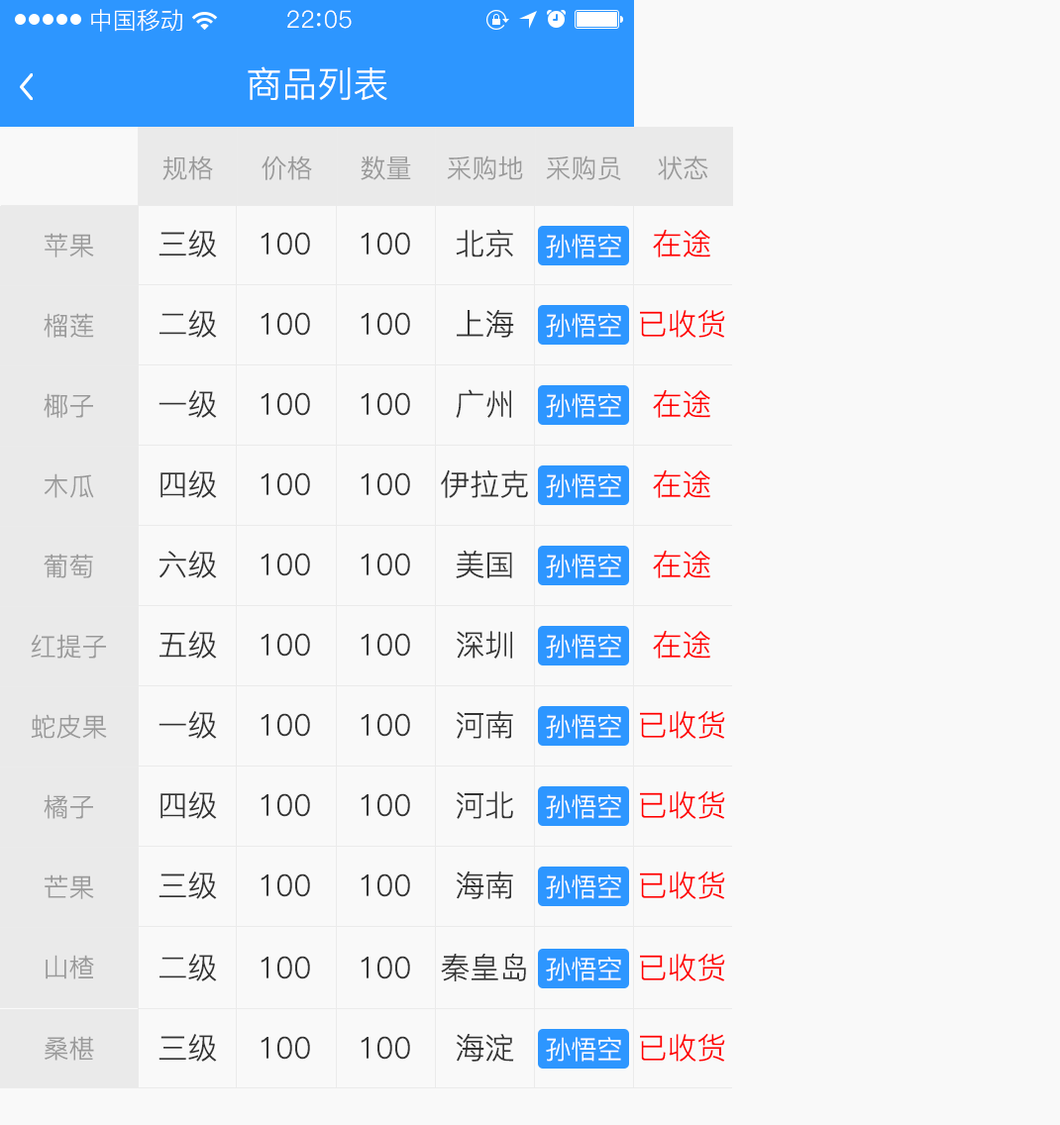
<style>
.page{position:relative;width:1060px;height:1125px;background:#f9f9f9}
.page>*{position:absolute;margin:0}
.t1{font:23.8px "PingFang-SC-Regular";color:#ffffff}
.t2{font:23.8px "PingFang-SC-Regular";letter-spacing:0.03em;color:#ffffff}
.t3{font:35.7px "PingFang-SC-Regular";color:#ffffff}
.t4{font:25.8px "PingFang-SC-Regular";color:#999999}
.t5{font:29.7px "PingFang-SC-Regular";color:#333333}
.t6{font:25.8px "PingFang-SC-Regular";color:#fefefe}
.t7{font:29.7px "PingFang-SC-Regular";color:#ff0000}
</style>
<div class="page">
<p class="t1" style="left:91px;top:9px;width:91px;height:23px">中国移动</p>
<p class="t2" style="left:287px;top:10px;width:65px;height:19px">22 05</p>
<p class="t3" style="left:248px;top:66px;width:139px;height:34px">商品列表</p>
<p class="t4" style="left:162px;top:156px;width:51px;height:24px">规格</p>
<p class="t4" style="left:261px;top:156px;width:51px;height:24px">价格</p>
<p class="t4" style="left:361px;top:156px;width:50px;height:24px">数量</p>
<p class="t4" style="left:447px;top:156px;width:76px;height:24px">采购地</p>
<p class="t4" style="left:546px;top:156px;width:75px;height:24px">采购员</p>
<p class="t4" style="left:658px;top:156px;width:50px;height:24px">状态</p>
<p class="t4" style="left:45px;top:233px;width:49px;height:25px">苹果</p>
<p class="t5" style="left:158px;top:230px;width:59px;height:28px">三级</p>
<p class="t5" style="left:260px;top:232px;width:50px;height:24px">100</p>
<p class="t5" style="left:361px;top:232px;width:49px;height:24px">100</p>
<p class="t5" style="left:456px;top:230px;width:57px;height:28px">北京</p>
<p class="t6" style="left:546px;top:234px;width:75px;height:25px">孙悟空</p>
<p class="t7" style="left:653px;top:230px;width:57px;height:28px">在途</p>
<p class="t4" style="left:44px;top:313px;width:50px;height:25px">榴莲</p>
<p class="t5" style="left:159px;top:310px;width:58px;height:28px">二级</p>
<p class="t5" style="left:260px;top:312px;width:50px;height:24px">100</p>
<p class="t5" style="left:361px;top:312px;width:49px;height:24px">100</p>
<p class="t5" style="left:457px;top:310px;width:57px;height:28px">上海</p>
<p class="t6" style="left:546px;top:313px;width:75px;height:25px">孙悟空</p>
<p class="t7" style="left:640px;top:310px;width:85px;height:28px">已收货</p>
<p class="t5" style="left:456px;top:389px;width:55px;height:29px">广州</p>
<p class="t4" style="left:44px;top:393px;width:49px;height:25px">椰子</p>
<p class="t5" style="left:158px;top:390px;width:59px;height:28px">一级</p>
<p class="t5" style="left:260px;top:392px;width:50px;height:24px">100</p>
<p class="t5" style="left:361px;top:392px;width:49px;height:24px">100</p>
<p class="t6" style="left:546px;top:393px;width:75px;height:25px">孙悟空</p>
<p class="t7" style="left:653px;top:390px;width:57px;height:28px">在途</p>
<p class="t4" style="left:45px;top:473px;width:49px;height:25px">木瓜</p>
<p class="t5" style="left:160px;top:470px;width:57px;height:28px">四级</p>
<p class="t5" style="left:260px;top:472px;width:50px;height:24px">100</p>
<p class="t5" style="left:361px;top:472px;width:49px;height:24px">100</p>
<p class="t5" style="left:441px;top:469px;width:87px;height:29px">伊拉克</p>
<p class="t6" style="left:546px;top:473px;width:75px;height:25px">孙悟空</p>
<p class="t7" style="left:653px;top:470px;width:57px;height:28px">在途</p>
<p class="t4" style="left:44px;top:554px;width:49px;height:24px">葡萄</p>
<p class="t5" style="left:159px;top:551px;width:58px;height:27px">六级</p>
<p class="t5" style="left:260px;top:553px;width:50px;height:23px">100</p>
<p class="t5" style="left:361px;top:553px;width:49px;height:23px">100</p>
<p class="t5" style="left:456px;top:551px;width:56px;height:27px">美国</p>
<p class="t6" style="left:546px;top:554px;width:75px;height:24px">孙悟空</p>
<p class="t7" style="left:653px;top:551px;width:57px;height:27px">在途</p>
<p class="t4" style="left:31px;top:634px;width:75px;height:25px">红提子</p>
<p class="t5" style="left:159px;top:631px;width:58px;height:28px">五级</p>
<p class="t5" style="left:260px;top:633px;width:50px;height:24px">100</p>
<p class="t5" style="left:361px;top:633px;width:49px;height:24px">100</p>
<p class="t5" style="left:457px;top:631px;width:55px;height:28px">深圳</p>
<p class="t6" style="left:546px;top:634px;width:75px;height:25px">孙悟空</p>
<p class="t7" style="left:653px;top:631px;width:57px;height:28px">在途</p>
<p class="t5" style="left:158px;top:711px;width:59px;height:28px">一级</p>
<p class="t5" style="left:260px;top:713px;width:50px;height:24px">100</p>
<p class="t5" style="left:361px;top:713px;width:49px;height:24px">100</p>
<p class="t5" style="left:456px;top:711px;width:57px;height:28px">河南</p>
<p class="t7" style="left:640px;top:711px;width:85px;height:28px">已收货</p>
<p class="t4" style="left:31px;top:714px;width:76px;height:25px">蛇皮果</p>
<p class="t6" style="left:546px;top:714px;width:75px;height:25px">孙悟空</p>
<p class="t4" style="left:44px;top:794px;width:49px;height:25px">橘子</p>
<p class="t5" style="left:160px;top:791px;width:57px;height:28px">四级</p>
<p class="t5" style="left:260px;top:793px;width:50px;height:24px">100</p>
<p class="t5" style="left:361px;top:793px;width:49px;height:24px">100</p>
<p class="t5" style="left:456px;top:791px;width:57px;height:28px">河北</p>
<p class="t6" style="left:546px;top:794px;width:75px;height:25px">孙悟空</p>
<p class="t7" style="left:640px;top:791px;width:85px;height:28px">已收货</p>
<p class="t4" style="left:45px;top:875px;width:49px;height:24px">芒果</p>
<p class="t5" style="left:158px;top:872px;width:59px;height:27px">三级</p>
<p class="t5" style="left:260px;top:874px;width:50px;height:23px">100</p>
<p class="t5" style="left:361px;top:874px;width:49px;height:23px">100</p>
<p class="t5" style="left:456px;top:872px;width:57px;height:27px">海南</p>
<p class="t6" style="left:546px;top:875px;width:75px;height:24px">孙悟空</p>
<p class="t7" style="left:640px;top:872px;width:85px;height:27px">已收货</p>
<p class="t5" style="left:159px;top:954px;width:58px;height:28px">二级</p>
<p class="t5" style="left:441px;top:953px;width:85px;height:29px">秦皇岛</p>
<p class="t7" style="left:640px;top:954px;width:85px;height:28px">已收货</p>
<p class="t4" style="left:46px;top:955px;width:48px;height:25px">山楂</p>
<p class="t5" style="left:260px;top:956px;width:50px;height:24px">100</p>
<p class="t5" style="left:361px;top:956px;width:49px;height:24px">100</p>
<p class="t6" style="left:546px;top:957px;width:75px;height:25px">孙悟空</p>
<p class="t4" style="left:45px;top:1036px;width:49px;height:25px">桑椹</p>
<p class="t5" style="left:158px;top:1034px;width:59px;height:28px">三级</p>
<p class="t5" style="left:260px;top:1036px;width:50px;height:24px">100</p>
<p class="t5" style="left:361px;top:1036px;width:49px;height:24px">100</p>
<p class="t5" style="left:456px;top:1034px;width:58px;height:28px">海淀</p>
<p class="t6" style="left:546px;top:1037px;width:75px;height:25px">孙悟空</p>
<p class="t7" style="left:640px;top:1034px;width:85px;height:28px">已收货</p>
</div>
